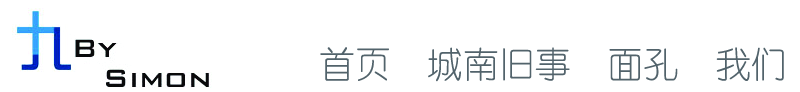
<style>
.page{position:relative;width:800px;height:92px;background:#ffffff}
.page>*{position:absolute;margin:0}
.t1{font:36px "YouYuan";color:#52636b}
</style>
<div class="page">
<p class="t1" style="left:320px;top:47px;width:464px;height:35px">首页  城南旧事  面孔  我们</p>
</div>
